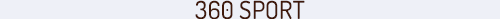
<style>
.page{position:relative;width:500px;height:19px;background:#eef0f7}
.page>*{position:absolute;margin:0}
.t1{font:25px "Dosis-Medium";color:#40190b}
</style>
<div class="page">
<p class="t1" style="left:195px;top:0px;width:110px;height:20px">360 SPORT</p>
</div>
